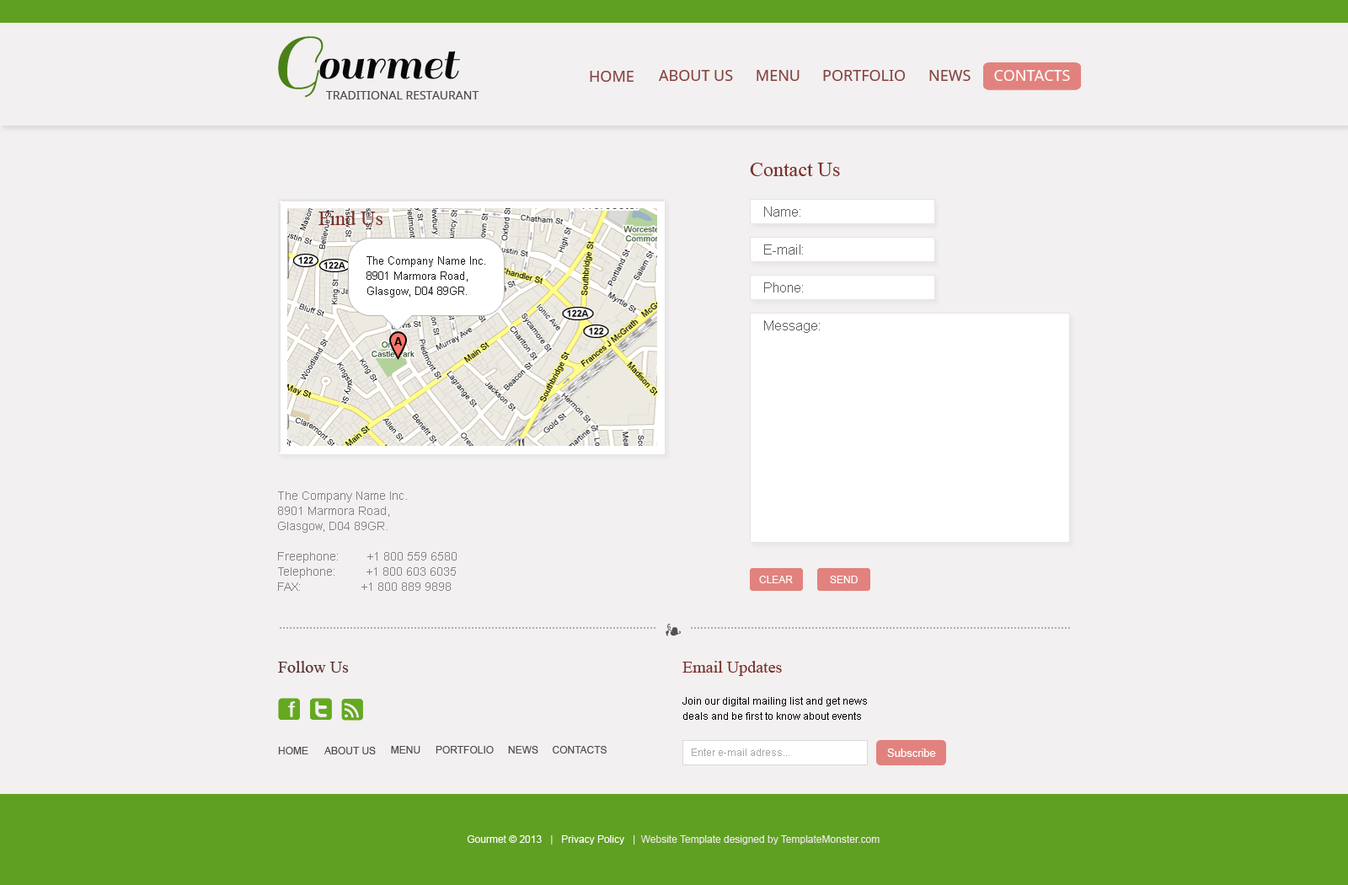
<style>
.page{position:relative;width:1348px;height:885px;background:#f2f0f0}
.page>*{position:absolute;margin:0}
.t1{font:75.8px "Sail-Regular";color:#4b8019}
.t2{font:50.5px "Sail-Regular";color:#080808}
.t3{font:15.2px "NotoSans";color:#85423f;text-transform:uppercase}
.t4{font:15.2px "NotoSans";color:#ffffff;text-transform:uppercase}
.t5{font:11.8px "NotoSans";color:#504f4f;text-transform:uppercase}
.t6{font:20.2px "TimesNewRomanPSMT";color:#79302b}
.t7{font:13.5px "ArialMT";color:#5e5e5e}
.t8{font:11px/15.2px "ArialMT";color:#1e1e1e}
.t9{font:11px "Arial-BoldMT";color:#000000}
.t10{font:11.8px/15.2px "ArialMT";color:#848383}
.t11{font:10.1px "ArialMT";color:#ffffff;text-transform:uppercase}
.t12{font:16.8px "TimesNewRomanPSMT";color:#583333}
.t13{font:16.8px "TimesNewRomanPSMT";color:#79302b}
.t14{font:10.1px/15.2px "ArialMT";color:#000000}
.t15{font:10.1px "ArialMT";color:#504f4f;text-transform:uppercase}
.t16{font:10.1px "ArialMT";color:#a8a8a8}
.t17{font:11px "ArialMT";color:#ffffff}
.t18{font:10.1px "ArialMT";color:#ebe5e5}
.t19{font:10.1px "ArialMT";color:#fcf9f9}
</style>
<div class="page">
<p class="t1" style="left:278px;top:36px;width:46px;height:62px">G</p>
<p class="t2" style="left:319px;top:51px;width:141px;height:28px">ourmet</p>
<p class="t3" style="left:590px;top:71px;width:44px;height:11px">Home</p>
<p class="t3" style="left:659px;top:70px;width:74px;height:11px">About Us</p>
<p class="t3" style="left:757px;top:70px;width:43px;height:11px">Menu</p>
<p class="t3" style="left:823px;top:70px;width:83px;height:11px">Portfolio</p>
<p class="t3" style="left:929px;top:70px;width:42px;height:11px">News</p>
<p class="t4" style="left:994px;top:70px;width:76px;height:11px">Contacts</p>
<p class="t5" style="left:326px;top:91px;width:153px;height:8px">Traditional restaurant</p>
<p class="t6" style="left:750px;top:163px;width:90px;height:13px">Contact Us</p>
<p class="t7" style="left:764px;top:206px;width:36px;height:11px">Name:</p>
<p class="t6" style="left:318px;top:211px;width:64px;height:14px">Find Us</p>
<p class="t7" style="left:764px;top:244px;width:39px;height:10px">E-mail:</p>
<p class="t8" style="left:366px;top:256px;width:119px;height:41px">The Company Name Inc.<br>8901 Marmora Road,<br>Glasgow, D04 89GR.</p>
<p class="t7" style="left:764px;top:282px;width:39px;height:10px">Phone:</p>
<p class="t7" style="left:764px;top:320px;width:56px;height:13px">Message:</p>
<p class="t9" style="left:394px;top:337px;width:9px;height:8px">A</p>
<p class="t10" style="left:278px;top:491px;width:179px;height:100px">The Company Name Inc.<br>8901 Marmora Road,<br>Glasgow, D04 89GR.<br><br>Freephone:        +1 800 559 6580<br>Telephone:         +1 800 603 6035<br>FAX:                  +1 800 889 9898</p>
<p class="t11" style="left:759px;top:575px;width:34px;height:8px">Clear</p>
<p class="t11" style="left:830px;top:575px;width:28px;height:8px">Send</p>
<p class="t12" style="left:278px;top:661px;width:71px;height:11px">Follow Us</p>
<p class="t13" style="left:682px;top:661px;width:100px;height:15px">Email Updates</p>
<p class="t14" style="left:682px;top:697px;width:185px;height:22px">Join our digital mailing list and get news deals and be first to know about events</p>
<p class="t15" style="left:278px;top:746px;width:30px;height:8px">Home</p>
<p class="t15" style="left:324px;top:746px;width:52px;height:8px">About us</p>
<p class="t15" style="left:391px;top:746px;width:29px;height:7px">Menu</p>
<p class="t15" style="left:436px;top:746px;width:58px;height:7px">Portfolio</p>
<p class="t15" style="left:508px;top:746px;width:30px;height:7px">News</p>
<p class="t15" style="left:553px;top:746px;width:54px;height:7px">Contacts</p>
<p class="t16" style="left:692px;top:748px;width:97px;height:8px">Enter e-mail adress...</p>
<p class="t17" style="left:887px;top:748px;width:49px;height:9px">Subscribe</p>
<p class="t18" style="left:467px;top:835px;width:413px;height:9px"><span class="t19">Gourmet © 2013   </span>| <span class="t19">  Privacy Policy  </span> |  Website Template designed by TemplateMonster.com</p>
</div>
